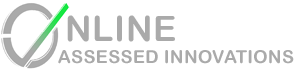
<style>
.page{position:relative;width:300px;height:70px;background:#ffffff}
.page>*{position:absolute;margin:0}
.t1{font:35px "ArialRoundedMTBold";letter-spacing:0.02em;color:#aaaaaa;text-transform:uppercase}
.t2{font:18px "ArialRoundedMTBold";letter-spacing:0.02em;color:#aaaaaa;text-transform:uppercase}
</style>
<div class="page">
<p class="t1" style="left:67px;top:15px;width:108px;height:27px">nline</p>
<p class="t2" style="left:58px;top:50px;width:236px;height:14px">AssesseD Innovations</p>
</div>
